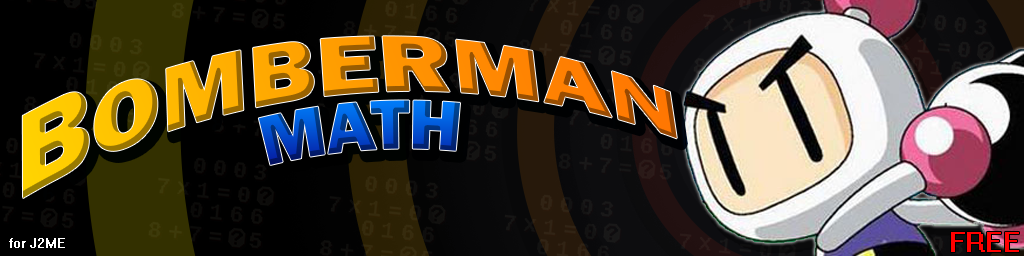
<style>
.page{position:relative;width:1024px;height:256px}
.page>*{position:absolute;margin:0}
.t1{font:96px "FranklinGothic-Heavy"}
.t2{font:116px "FranklinGothic-Heavy"}
.t3{font:72px "FranklinGothic-Heavy"}
.t4{font:24px "System";color:#ff0000}
.t5{font:18px "System";color:#ffffff}
</style>
<div class="page">
<p class="t1" style="left:22px;top:36px;width:655px;height:162px;rotate:-4deg"><span class="t2">B</span>OMBERMAN</p>
<p class="t3" style="left:258px;top:100px;width:202px;height:65px;rotate:-4deg">MATH</p>
<p class="t4" style="left:951px;top:232px;width:68px;height:20px">FREE</p>
<p class="t5" style="left:9px;top:238px;width:56px;height:10px">for J2ME</p>
</div>
